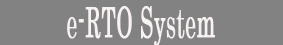
<style>
.page{position:relative;width:283px;height:45px;background:#838282}
.page>*{position:absolute;margin:0}
.t1{font:41.7px "Century";color:#f8f2f2;font-weight:bold;scale:0.51 1}
</style>
<div class="page">
<p class="t1" style="left:67px;top:6px;width:148px;height:41px">e-RTO System</p>
</div>
